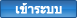
<style>
.page{position:relative;width:77px;height:18px}
.page>*{position:absolute;margin:0}
.t1{font:12.5px "Tahoma";color:#fefefe;font-weight:bold}
</style>
<div class="page">
<p class="t1" style="left:15px;top:3px;width:47px;height:11px">เข้าระบบ</p>
</div>
